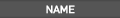
<style>
.page{position:relative;width:120px;height:18px;background:#555555}
.page>*{position:absolute;margin:0}
.t1{font:10.2px "HCRDotum-Bold";color:#ffffff}
</style>
<div class="page">
<p class="t1" style="left:46px;top:5px;width:29px;height:9px">NAME</p>
</div>
